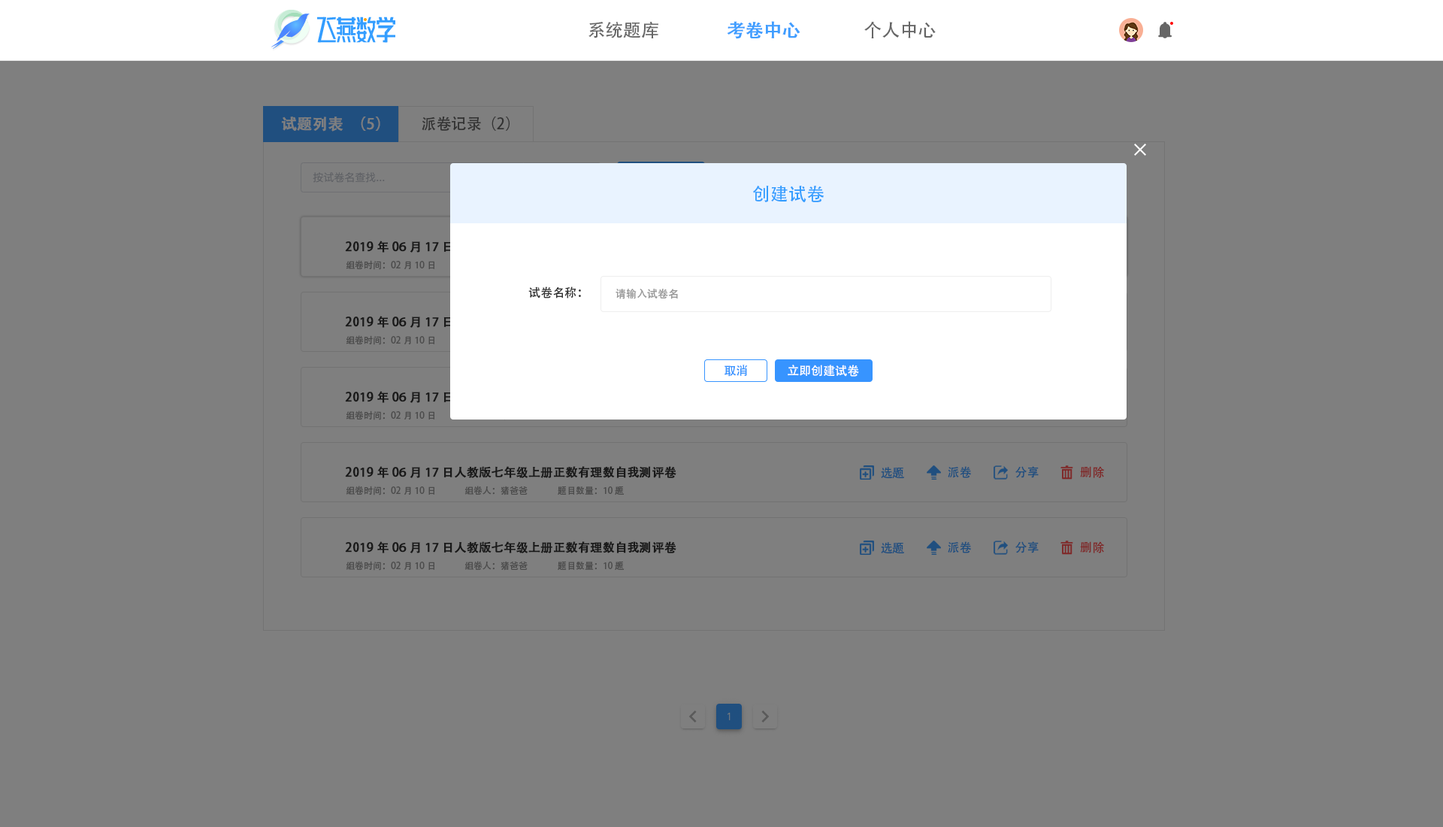
<style>
.page{position:relative;width:1443px;height:827px;background:#7f7f7f}
.page>*{position:absolute;margin:0}
.t1{font:18px "AdobeHeitiStd-Regular";color:#666666}
.t2{font:18px "AdobeHeitiStd-Regular";color:#409eff;font-weight:bold}
.t3{font:15px "AdobeHeitiStd-Regular";color:#7f7f7f;font-weight:bold}
.t4{font:15px "AdobeHeitiStd-Regular";color:#333333}
.t5{font:18px "AdobeHeitiStd-Regular";color:#339dff}
.t6{font:9px "AdobeHeitiStd-Regular";color:#4c4c4c}
.t7{font:12px "AdobeHeitiStd-Regular";color:#333333}
.t8{font:10.5px "AdobeHeitiStd-Regular";color:#999999}
.t9{font:12px "AdobeHeitiStd-Regular";color:#3794ff}
.t10{font:12px "AdobeHeitiStd-Regular";color:#ffffff}
.t11{font:12px "AdobeHeitiStd-Regular";color:#191919;font-weight:bold}
.t12{font:12px "AdobeHeitiStd-Regular";color:#204f7f}
.t13{font:12px "AdobeHeitiStd-Regular";color:#7f2a2a}
</style>
<div class="page">
<p class="t1" style="left:588px;top:22px;width:70px;height:16px">系统题库</p>
<p class="t2" style="left:727px;top:21px;width:73px;height:18px">考卷中心</p>
<p class="t1" style="left:864px;top:21px;width:71px;height:17px">个人中心</p>
<p class="t3" style="left:281px;top:116px;width:99px;height:15px">试题列表（5）</p>
<p class="t4" style="left:422px;top:116px;width:87px;height:15px">派卷记录（2）</p>
<p class="t5" style="left:753px;top:185px;width:71px;height:17px">创建试卷</p>
<p class="t6" style="left:346px;top:260px;width:89px;height:10px">组卷时间：02月10日</p>
<p class="t7" style="left:528px;top:286px;width:53px;height:12px">试卷名称：</p>
<p class="t8" style="left:615px;top:289px;width:63px;height:10px">请输入试卷名</p>
<p class="t6" style="left:346px;top:335px;width:89px;height:10px">组卷时间：02月10日</p>
<p class="t9" style="left:724px;top:364px;width:24px;height:12px">取消</p>
<p class="t10" style="left:787px;top:364px;width:72px;height:12px">立即创建试卷</p>
<p class="t6" style="left:346px;top:410px;width:89px;height:10px">组卷时间：02月10日</p>
<p class="t11" style="left:345px;top:466px;width:331px;height:12px">2019年06月17日人教版七年级上册正数有理数自我测评卷</p>
<p class="t12" style="left:881px;top:467px;width:23px;height:11px">选题</p>
<p class="t12" style="left:948px;top:466px;width:23px;height:12px">派卷</p>
<p class="t12" style="left:1015px;top:466px;width:23px;height:12px">分享</p>
<p class="t13" style="left:1080px;top:466px;width:25px;height:12px">删除</p>
<p class="t6" style="left:346px;top:485px;width:89px;height:10px">组卷时间：02月10日</p>
<p class="t6" style="left:464px;top:485px;width:63px;height:10px">组卷人：猪爸爸</p>
<p class="t6" style="left:558px;top:485px;width:66px;height:9px">题目数量：10题</p>
<p class="t11" style="left:345px;top:541px;width:331px;height:12px">2019年06月17日人教版七年级上册正数有理数自我测评卷</p>
<p class="t12" style="left:881px;top:542px;width:23px;height:11px">选题</p>
<p class="t12" style="left:948px;top:541px;width:23px;height:12px">派卷</p>
<p class="t12" style="left:1015px;top:541px;width:23px;height:12px">分享</p>
<p class="t13" style="left:1080px;top:541px;width:25px;height:12px">删除</p>
<p class="t6" style="left:346px;top:561px;width:89px;height:9px">组卷时间：02月10日</p>
<p class="t6" style="left:464px;top:561px;width:63px;height:9px">组卷人：猪爸爸</p>
<p class="t6" style="left:558px;top:561px;width:66px;height:9px">题目数量：10题</p>
</div>
